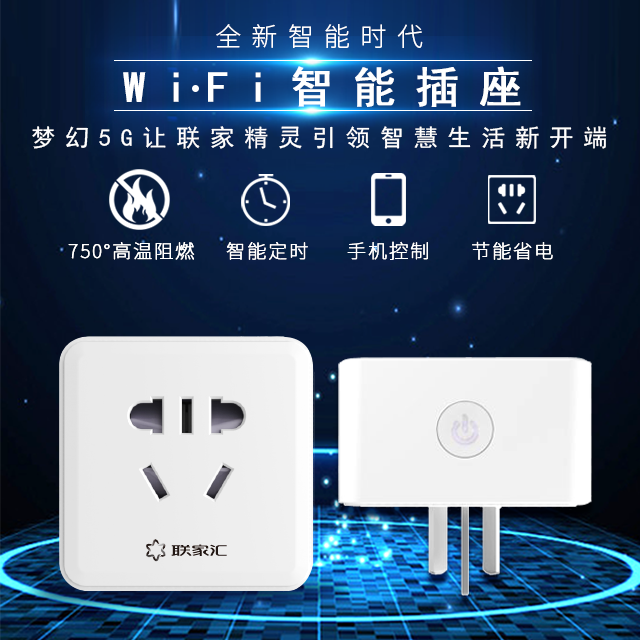
<style>
.page{position:relative;width:640px;height:640px}
.page>*{position:absolute;margin:0}
.t1{font:25.9px "SourceHanSansCN-Light";letter-spacing:0.4em;color:#ffffff;text-transform:uppercase}
.t2{font:43.3px "SimHei";letter-spacing:0.42em;color:#ffffff;text-transform:uppercase;font-weight:bold}
.t3{font:43.3px "SimHei";letter-spacing:0.42em;color:#ffffff;font-weight:bold}
.t4{font:24px "SimHei";letter-spacing:0.38em;color:#ffffff;text-transform:uppercase}
.t5{font:19px "SourceHanSansCN-ExtraLight";letter-spacing:0.08em;color:#ffffff;text-transform:uppercase;font-weight:bold}
</style>
<div class="page">
<p class="t1" style="left:216px;top:24px;width:207px;height:24px">全新智能时代</p>
<p class="t2" style="left:123px;top:66px;width:398px;height:41px">w<span class="t3">i</span>f<span class="t3">i</span>智能插座</p>
<p class="t4" style="left:32px;top:126px;width:575px;height:23px">梦幻5G让联家精灵引领智慧生活新开端</p>
<p class="t5" style="left:68px;top:242px;width:127px;height:18px">750°高温阻燃</p>
<p class="t5" style="left:226px;top:242px;width:82px;height:18px">智能定时</p>
<p class="t5" style="left:347px;top:241px;width:81px;height:19px">手机控制</p>
<p class="t5" style="left:472px;top:241px;width:81px;height:19px">节能省电</p>
</div>
